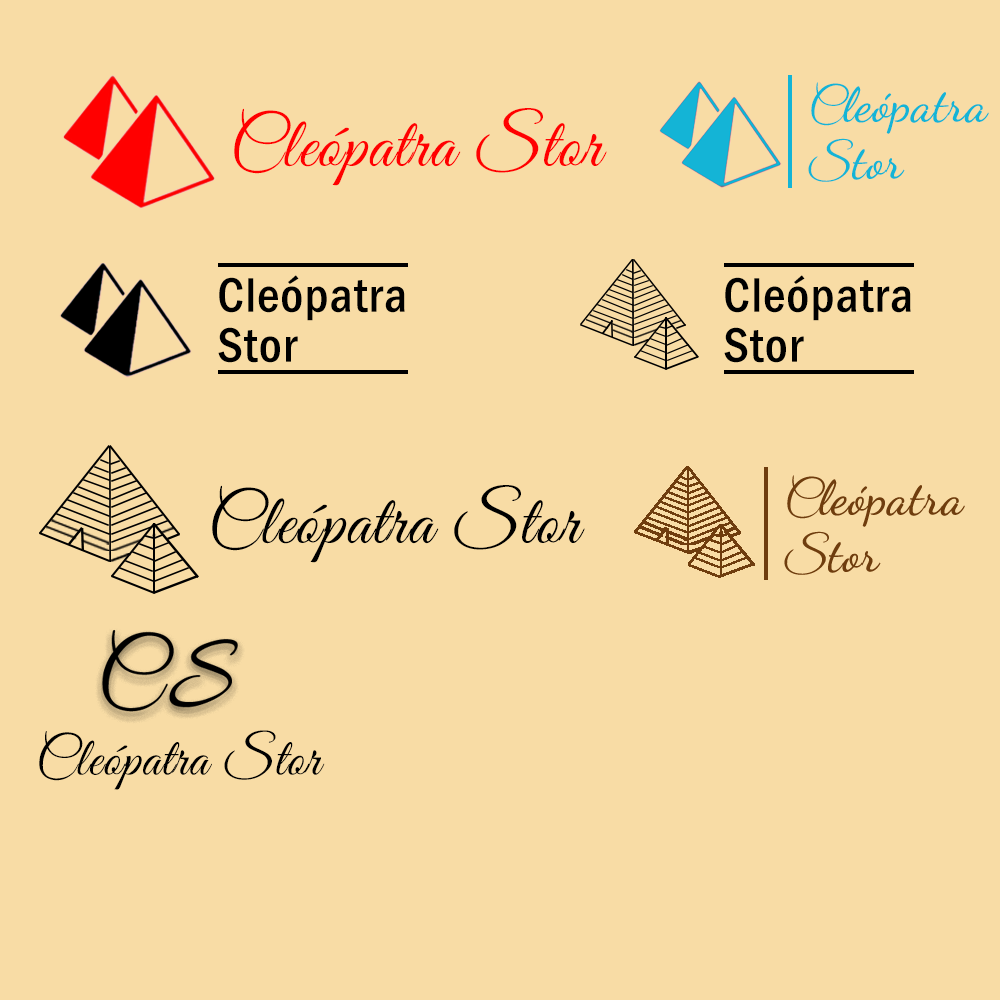
<style>
.page{position:relative;width:1000px;height:1000px;background:#f8dca5}
.page>*{position:absolute;margin:0}
.t1{font:47.5px "DancingScript-SemiBold";letter-spacing:0.02em;color:#14b4d6}
.t2{font:47.5px "GreatVibes-Regular";letter-spacing:0.02em;color:#14b4d6}
.t3{font:71.2px "GreatVibes-Regular";letter-spacing:0.02em;color:#ff0000}
.t4{font:50.4px/50px "FranklinGothic-MediumCond";letter-spacing:0.02em;color:#000000}
.t5{font:71.2px "GreatVibes-Regular";letter-spacing:0.02em;color:#000000}
.t6{font:54.5px "GreatVibes-Regular";letter-spacing:0.02em;color:#000000}
</style>
<div class="page">
<p class="t1" style="left:808px;top:82px;width:181px;height:100px"><span class="t2">C</span>leópatra<span class="t2"> <br>S</span>tor</p>
<p class="t3" style="left:234px;top:108px;width:373px;height:78px">Cleópatra Stor</p>
<p class="t4" style="left:218px;top:275px;width:187px;height:88px">Cleópatra <br>Stor</p>
<p class="t4" style="left:724px;top:275px;width:187px;height:88px">Cleópatra <br>Stor</p>
<p class="t5" style="left:212px;top:485px;width:373px;height:78px">Cleópatra Stor</p>
<p class="t6" style="left:39px;top:730px;width:286px;height:60px">Cleópatra Stor</p>
</div>
